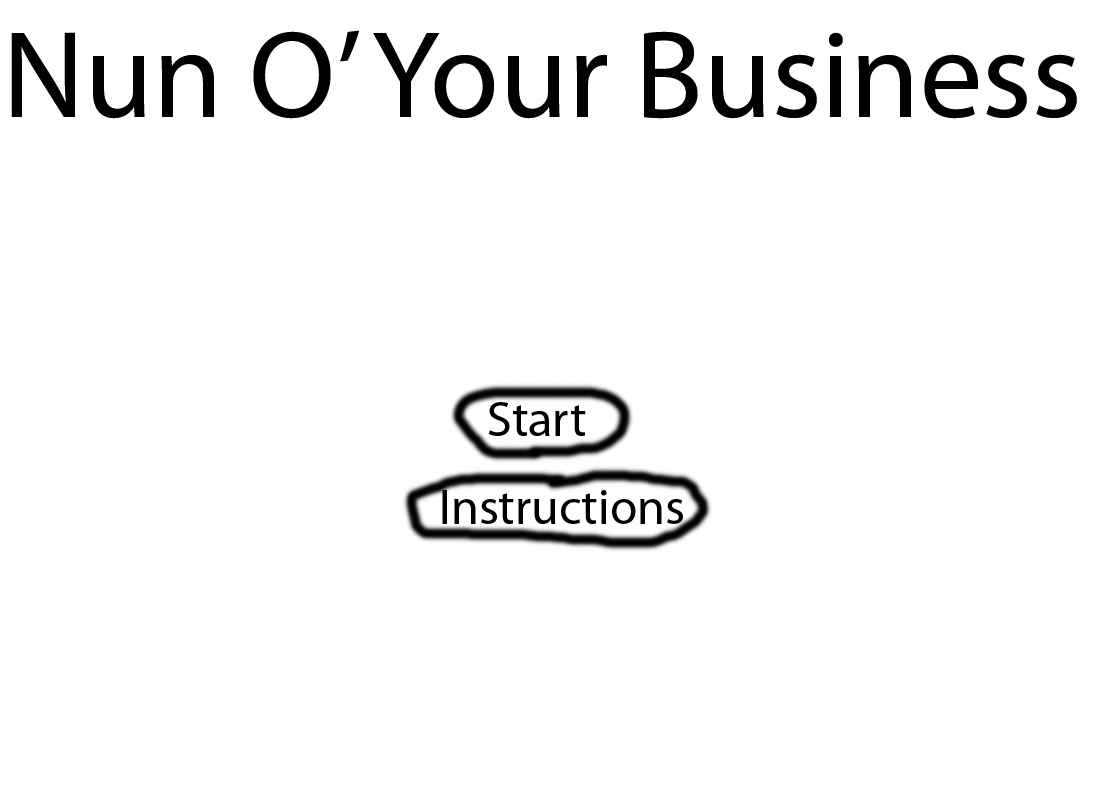
<style>
.page{position:relative;width:1100px;height:800px;background:#ffffff}
.page>*{position:absolute;margin:0}
.t1{font:125px "MyriadPro-Regular";color:#000000}
.t2{font:50px "MyriadPro-Regular";color:#000000}
</style>
<div class="page">
<p class="t1" style="left:11px;top:30px;width:1066px;height:89px">Nun O’ Your Business</p>
<p class="t2" style="left:488px;top:402px;width:98px;height:34px">Start</p>
<p class="t2" style="left:442px;top:490px;width:241px;height:34px">Instructions</p>
</div>
